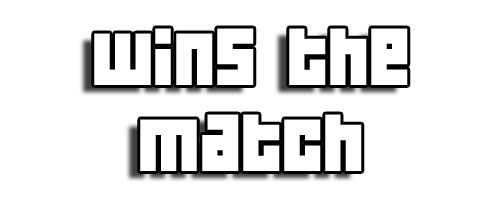
<style>
.page{position:relative;width:500px;height:200px;background:#ffffff}
.page>*{position:absolute;margin:0}
.t1{font:72px "04b19";color:#ffffff}
</style>
<div class="page">
<p class="t1" style="left:94px;top:28px;width:314px;height:143px;text-align:center">wins the match</p>
</div>
